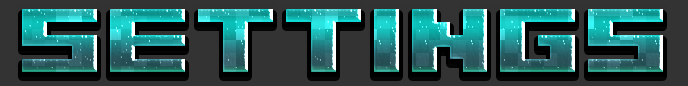
<style>
.page{position:relative;width:688px;height:86px;background:#333333}
.page>*{position:absolute;margin:0}
.t1{font:100px "04b09";text-transform:uppercase}
</style>
<div class="page">
<p class="t1" style="left:22px;top:9px;width:641px;height:63px">SETTINGS</p>
</div>
